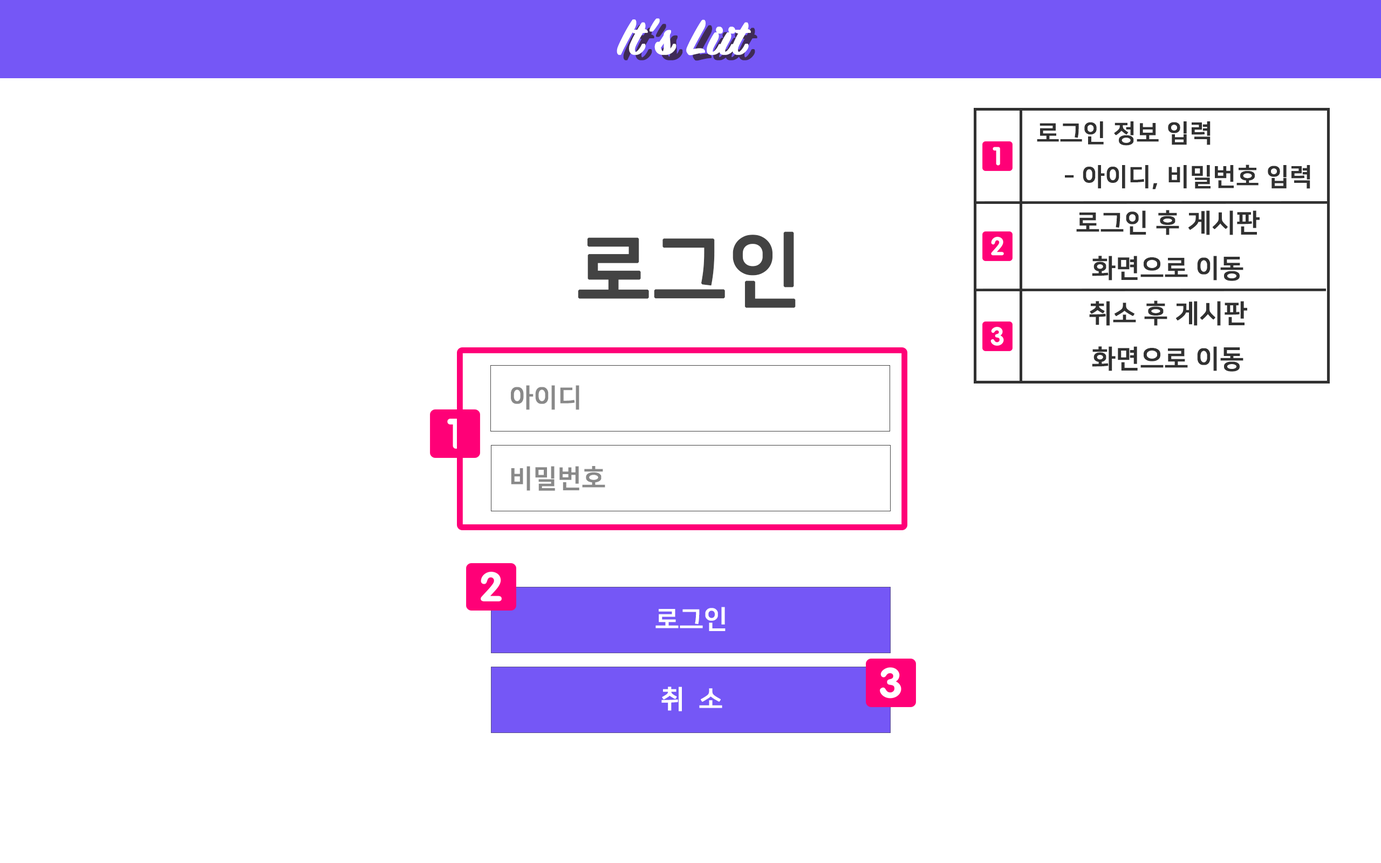
<style>
.page{position:relative;width:1381px;height:863px;background:#ffffff}
.page>*{position:absolute;margin:0}
.t1{font:54px "SignPainter-HouseScriptSemibold";color:#ffffff;font-weight:bold}
.t2{font:54px "SignPainter-HouseScriptSemibold";color:#3f2b56;font-weight:bold}
.t3{font:24.8px "NanumSquareB";color:#313131;font-weight:bold}
.t4{font:25.9px "NanumSquareB";color:#313131;font-weight:bold}
.t5{font:80.9px "NanumSquareB";color:#434343;font-weight:bold}
.t6{font:25.9px "NanumSquareB";color:#898989;font-weight:bold}
.t7{font:25.9px "NanumSquareB";color:#ffffff;font-weight:bold}
</style>
<div class="page">
<p class="t1" style="left:617px;top:18px;width:134px;height:38px">It’s Liit</p>
<p class="t2" style="left:623px;top:24px;width:135px;height:37px">It’s Liit</p>
<p class="t3" style="left:1037px;top:121px;width:274px;height:68px">로그인 정보 입력<br>    - 아이디, 비밀번호 입력</p>
<p class="t4" style="left:1076px;top:210px;width:184px;height:71px;text-align:center">로그인 후 게시판<br>화면으로 이동</p>
<p class="t5" style="left:578px;top:231px;width:218px;height:77px">로그인</p>
<p class="t4" style="left:1089px;top:301px;width:158px;height:71px;text-align:center">취소 후 게시판<br>화면으로 이동</p>
<p class="t6" style="left:511px;top:385px;width:68px;height:25px">아이디</p>
<p class="t6" style="left:511px;top:466px;width:94px;height:25px">비밀번호</p>
<p class="t7" style="left:656px;top:607px;width:70px;height:24px">로그인</p>
<p class="t7" style="left:661px;top:687px;width:61px;height:25px">취  소</p>
</div>
